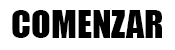
<style>
.page{position:relative;width:175px;height:50px;background:#ffffff}
.page>*{position:absolute;margin:0}
.t1{font:36px "Impact";color:#000000}
</style>
<div class="page">
<p class="t1" style="left:12px;top:10px;width:150px;height:28px">COMENZAR</p>
</div>
